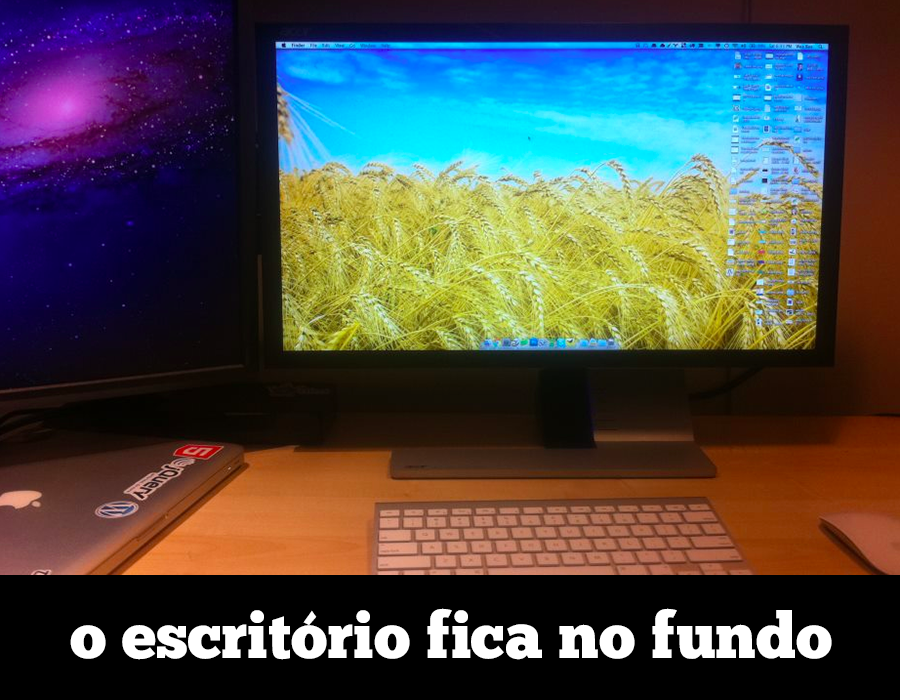
<style>
.page{position:relative;width:900px;height:700px}
.page>*{position:absolute;margin:0}
.t1{font:64px "ChunkFive-Roman";color:#ffffff}
</style>
<div class="page">
<p class="t1" style="left:70px;top:608px;width:762px;height:52px">o escritório fica no fundo</p>
</div>
